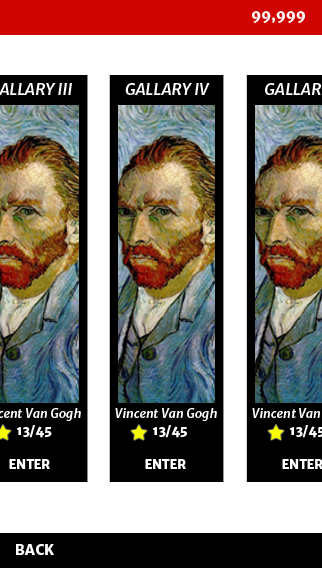
<style>
.page{position:relative;width:322px;height:568px;background:#ffffff}
.page>*{position:absolute;margin:0}
.t1{font:14px "MerriweatherSans-ExtraBold";color:#ffffff}
.t2{font:15.9px "MerriweatherSans-BoldItalic";color:#ffffff}
.t3{font:12.5px "MerriweatherSans-BoldItalic";color:#ffffff}
.t4{font:12.5px "MerriweatherSans-ExtraBold";color:#ffffff}
</style>
<div class="page">
<p class="t1" style="left:252px;top:11px;width:53px;height:12px">99,999</p>
<p class="t2" style="left:125px;top:83px;width:85px;height:12px">GALLARY IV</p>
<p class="t3" style="left:115px;top:408px;width:102px;height:13px">Vincent Van Gogh</p>
<p class="t4" style="left:16px;top:425px;width:36px;height:13px">13/45</p>
<p class="t4" style="left:152px;top:425px;width:35px;height:13px">13/45</p>
<p class="t4" style="left:9px;top:459px;width:41px;height:10px">ENTER</p>
<p class="t4" style="left:145px;top:459px;width:41px;height:10px">ENTER</p>
<p class="t4" style="left:282px;top:459px;width:41px;height:10px">ENTER</p>
<p class="t1" style="left:16px;top:544px;width:38px;height:11px">BACK</p>
</div>
